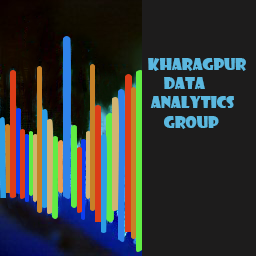
<style>
.page{position:relative;width:256px;height:256px;background:#1d1c1c}
.page>*{position:absolute;margin:0}
.t1{font:16px "ShowcardGothic-Reg";color:#5bb8df}
</style>
<div class="page">
<p class="t1" style="left:148px;top:58px;width:98px;height:71px">KHARAGPUR<br>     DATA <br> ANALYTICS<br>     Group</p>
</div>
